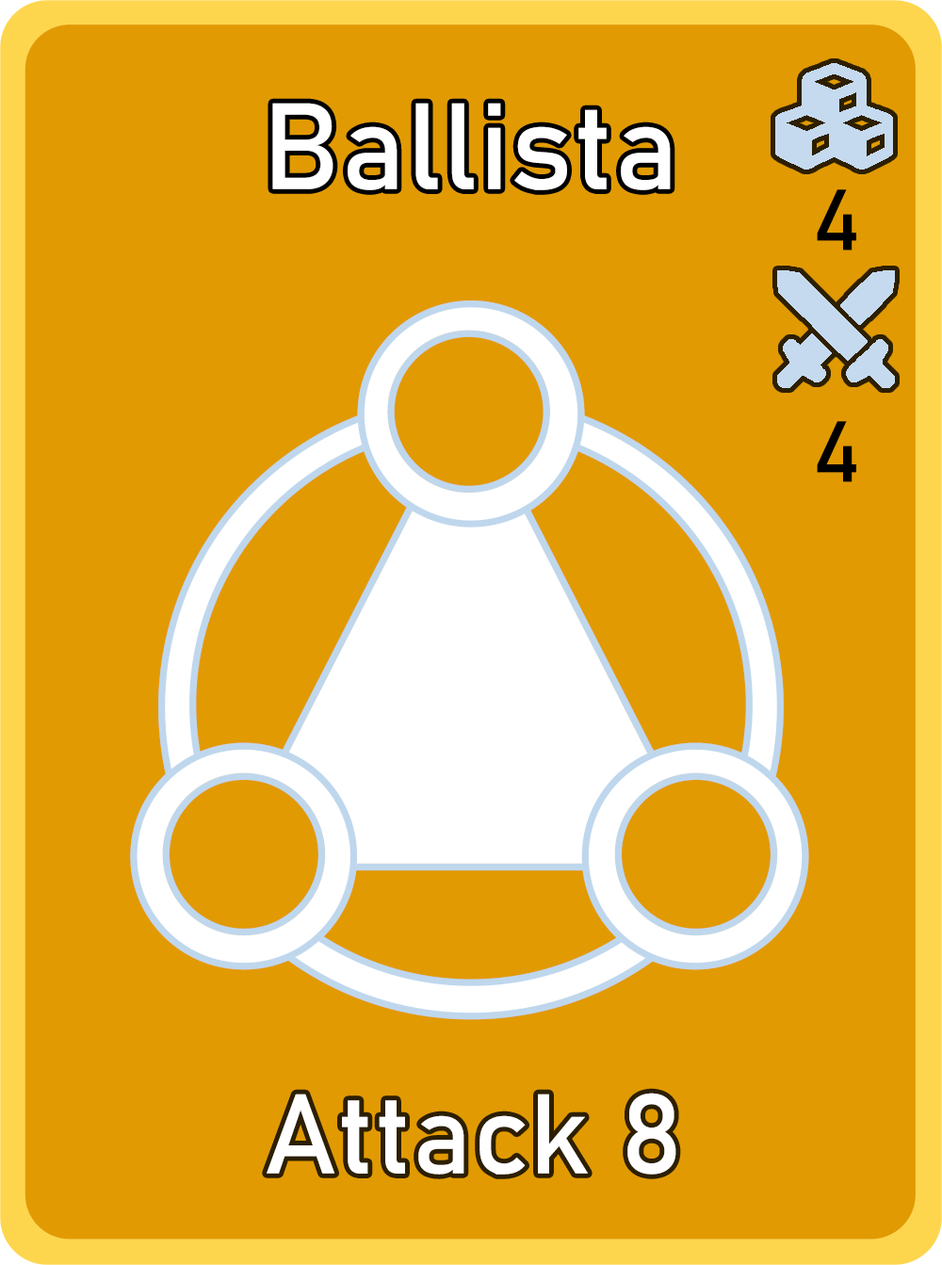
<style>
.page{position:relative;width:942px;height:1265px;background:#e19a02}
.page>*{position:absolute;margin:0}
.t1{font:120.6px "Bahnschrift";letter-spacing:0.01em;color:#ffffff}
.t2{font:85px "Bahnschrift";letter-spacing:0.01em;color:#000000}
.t3{font:111.3px "Bahnschrift";letter-spacing:0.01em;color:#ffffff}
</style>
<div class="page">
<p class="t1" style="left:272px;top:103px;width:399px;height:87px">Ballista</p>
<p class="t2" style="left:817px;top:189px;width:40px;height:62px">4</p>
<p class="t2" style="left:817px;top:421px;width:40px;height:61px">4</p>
<p class="t3" style="left:267px;top:1093px;width:410px;height:82px">Attack 8</p>
</div>
